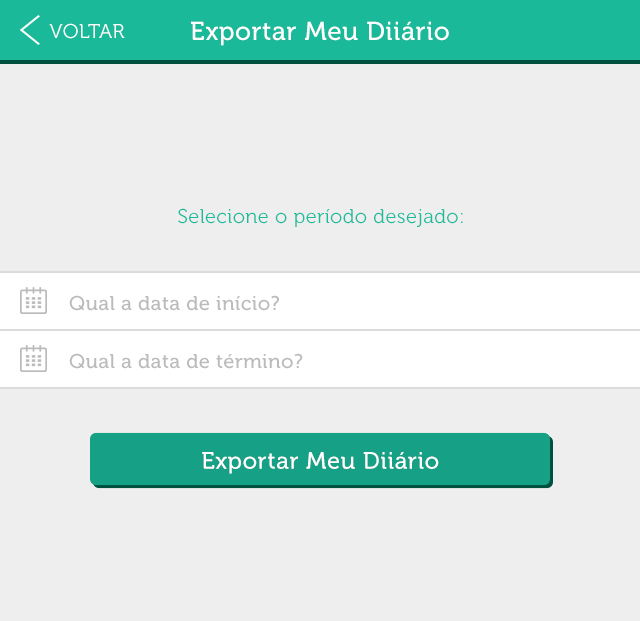
<style>
.page{position:relative;width:640px;height:621px;background:#eeeeee}
.page>*{position:absolute;margin:0}
.t1{font:20px "Museo300-Regular";letter-spacing:0.02em;color:#ffffff;text-transform:uppercase}
.t2{font:26px "Museo500-Regular";letter-spacing:0.02em;color:#ffffff}
.t3{font:20px "Museo300-Regular";letter-spacing:0.02em;color:#1abc9c}
.t4{font:20px "Museo500-Regular";letter-spacing:0.02em;color:#bbbbbb}
.t5{font:23.8px "Museo500-Regular";letter-spacing:0.02em;color:#ffffff}
</style>
<div class="page">
<p class="t1" style="left:49px;top:23px;width:76px;height:16px">Voltar</p>
<p class="t2" style="left:191px;top:21px;width:258px;height:25px">Exportar Meu Diiário</p>
<p class="t3" style="left:178px;top:208px;width:285px;height:19px">Selecione o período desejado:</p>
<p class="t4" style="left:69px;top:295px;width:210px;height:16px">Qual a data de início?</p>
<p class="t4" style="left:69px;top:353px;width:234px;height:16px">Qual a data de término?</p>
<p class="t5" style="left:202px;top:452px;width:237px;height:22px">Exportar Meu Diiário</p>
</div>
